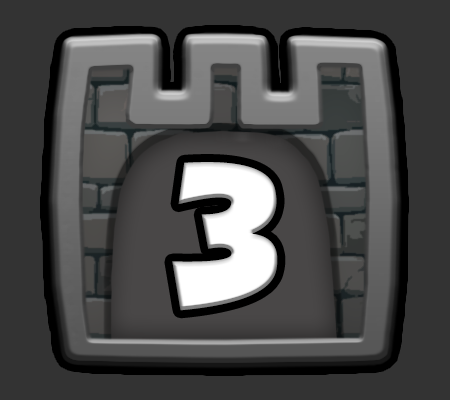
<style>
.page{position:relative;width:450px;height:400px;background:#333333}
.page>*{position:absolute;margin:0}
.t1{font:199.6px "Funhouse";color:#ffffff}
</style>
<div class="page">
<p class="t1" style="left:172px;top:162px;width:106px;height:149px">3</p>
</div>
